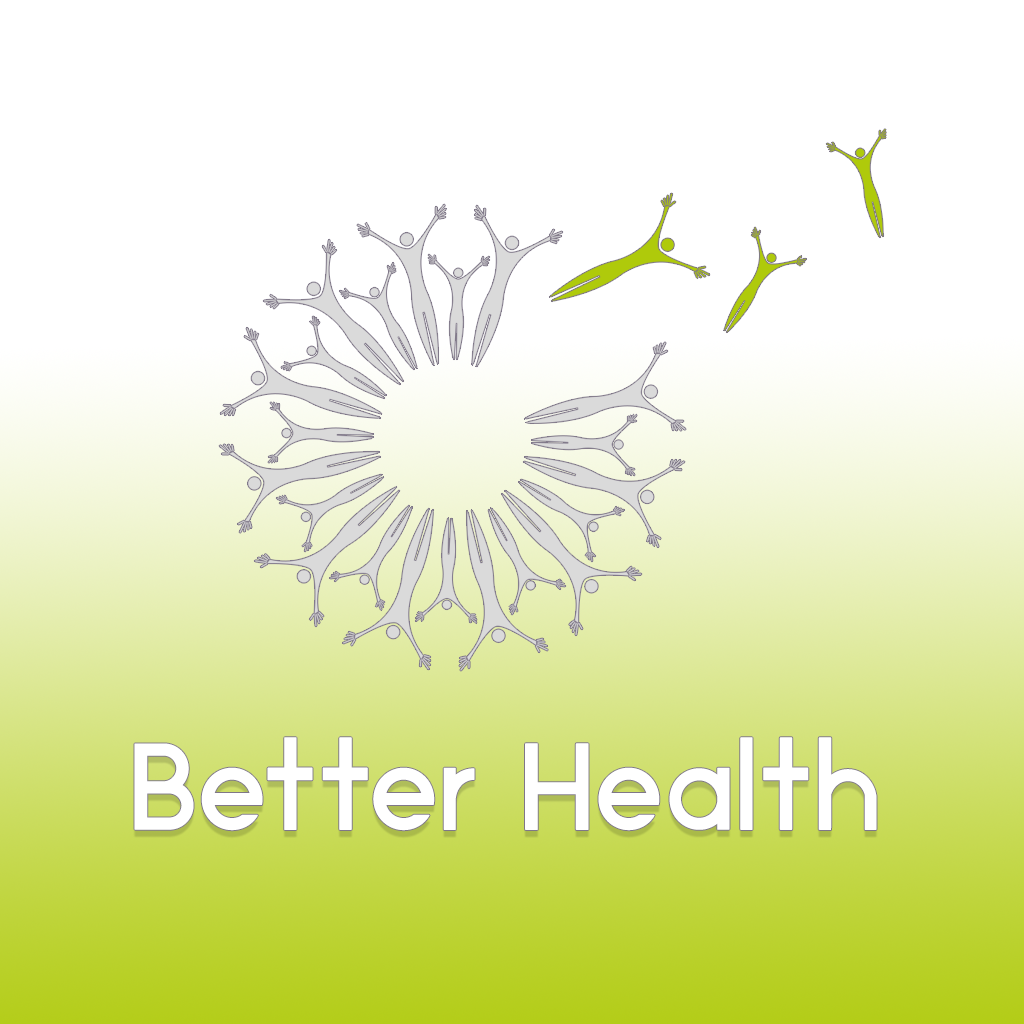
<style>
.page{position:relative;width:1024px;height:1024px;background:#ffffff}
.page>*{position:absolute;margin:0}
.t1{font:122px "Ikaros-Regular";color:#ffffff;font-weight:bold}
</style>
<div class="page">
<p class="t1" style="left:134px;top:737px;width:743px;height:94px">Better Health</p>
</div>
